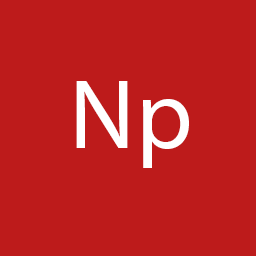
<style>
.page{position:relative;width:256px;height:256px;background:#bd1b1b}
.page>*{position:absolute;margin:0}
.t1{font:100px "MyriadPro-Regular";color:#ffffff}
</style>
<div class="page">
<p class="t1" style="left:76px;top:81px;width:113px;height:87px">Np</p>
</div>
